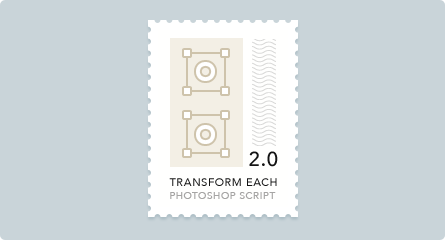
<style>
.page{position:relative;width:445px;height:240px;background:#c9d4d9}
.page>*{position:absolute;margin:0}
.t1{font:20px "Avenir-Medium";letter-spacing:0.05em;color:#141414}
.t2{font:11px "Avenir-Roman";letter-spacing:0.05em;color:#141414}
.t3{font:10px "Avenir-Roman";letter-spacing:0.05em;color:#a6a5a5}
</style>
<div class="page">
<p class="t1" style="left:249px;top:151px;width:29px;height:16px">2.0</p>
<p class="t2" style="left:169px;top:178px;width:108px;height:8px">TRANSFORM EACH</p>
<p class="t3" style="left:170px;top:192px;width:106px;height:7px">PHOTOSHOP SCRIPT</p>
</div>
